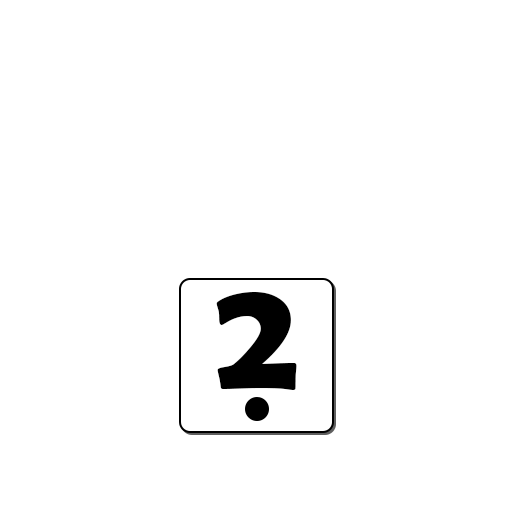
<style>
.page{position:relative;width:512px;height:512px;background:#ffffff}
.page>*{position:absolute;margin:0}
.t1{font:160px "BerlinSansFBDemi-Bold";color:#000000}
</style>
<div class="page">
<p class="t1" style="left:216px;top:292px;width:81px;height:98px">2</p>
</div>
